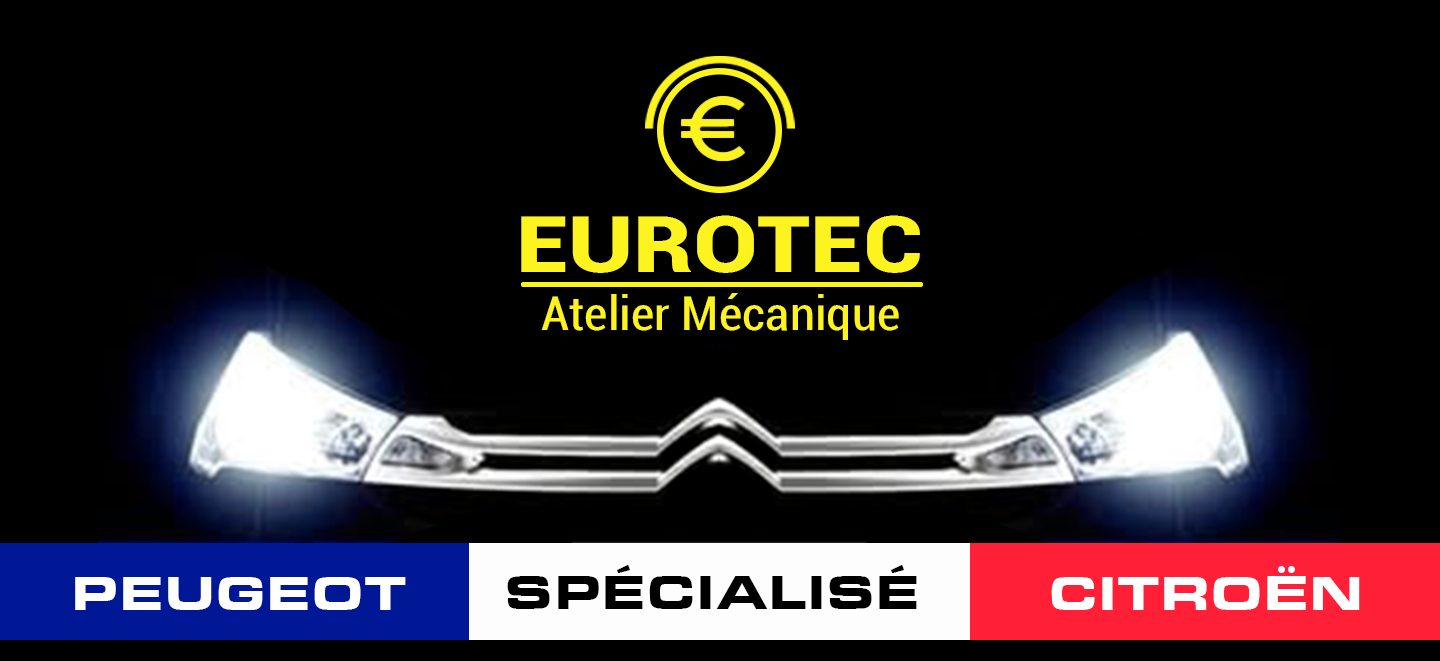
<style>
.page{position:relative;width:1440px;height:661px;background:#000000}
.page>*{position:absolute;margin:0}
.t1{font:78.4px "Roboto-Black";color:#fdf31f;scale:1.2 1}
.t2{font:45.9px "Roboto-Condensed";color:#fdf31f;scale:1.12 1}
.t3{font:50px "EurostileExtended-Black";color:#000000}
.t4{font:50px "EurostileExtended-Black";color:#ffffff}
.t5{font:51.3px "EurostileExtended-Black";color:#ffffff}
</style>
<div class="page">
<p class="t1" style="left:521px;top:215px;width:399px;height:58px">EUROTEC</p>
<p class="t2" style="left:541px;top:293px;width:358px;height:47px">Atelier Mécanique</p>
<p class="t3" style="left:507px;top:565px;width:410px;height:44px">SPÉCIALISÉ</p>
<p class="t4" style="left:75px;top:577px;width:331px;height:33px">PEUGEOT</p>
<p class="t4" style="left:1051px;top:576px;width:309px;height:34px">CITRO<span class="t5">E</span>N</p>
</div>
